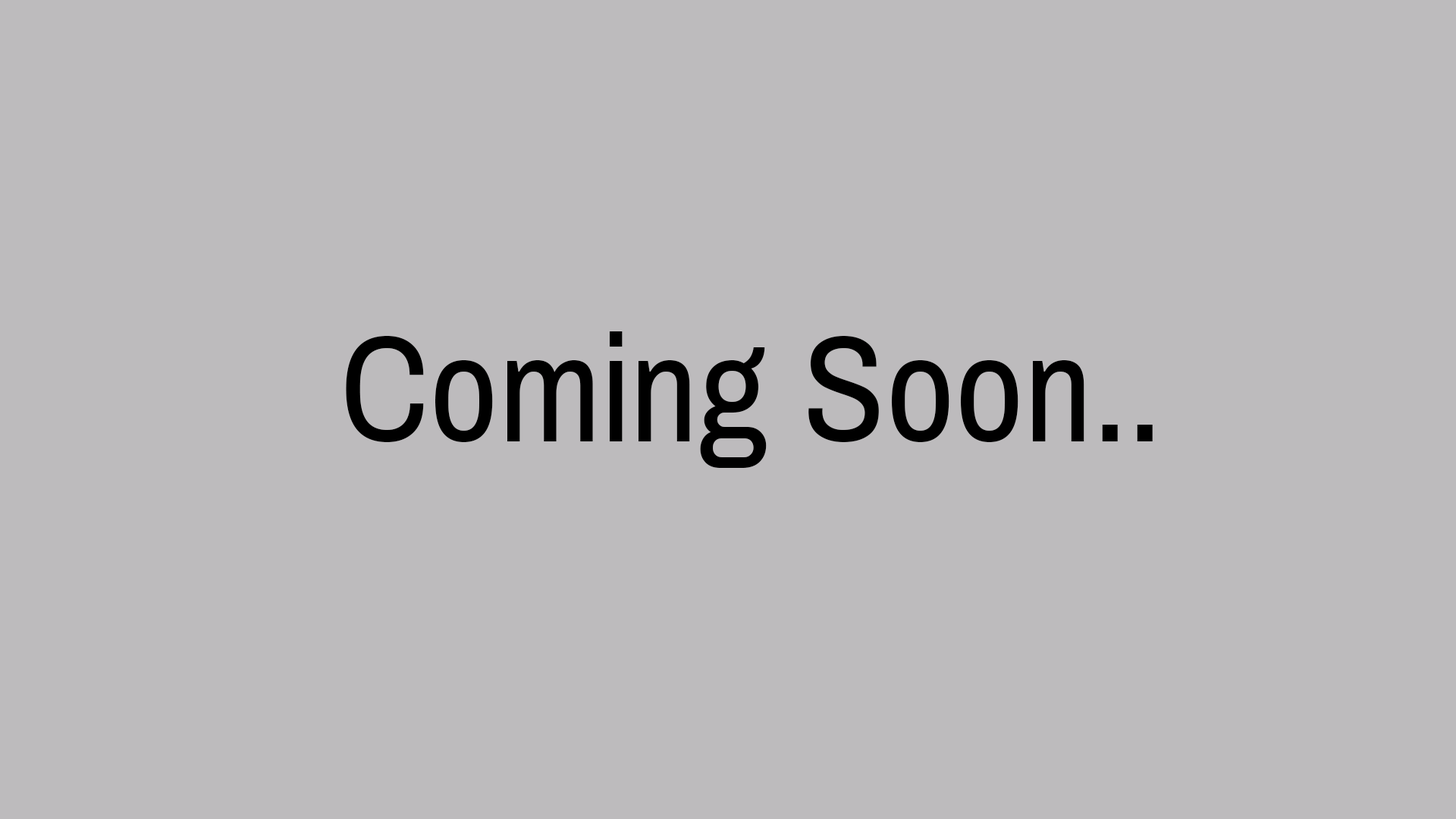
<style>
.page{position:relative;width:1456px;height:819px;background:#bdbbbd}
.page>*{position:absolute;margin:0}
.t1{font:151.7px "ArchivoNarrow-Regular";color:#000000}
</style>
<div class="page">
<p class="t1" style="left:346px;top:331px;width:807px;height:137px">Coming Soon..</p>
</div>
